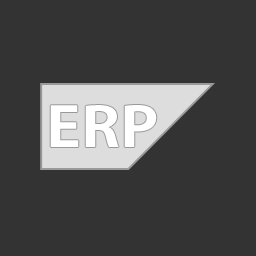
<style>
.page{position:relative;width:256px;height:256px;background:#333333}
.page>*{position:absolute;margin:0}
.t1{font:54.2px "AdobeGothicStd-Bold";color:#ffffff;scale:1.18 1}
</style>
<div class="page">
<p class="t1" style="left:50px;top:105px;width:107px;height:42px">ERP</p>
</div>
